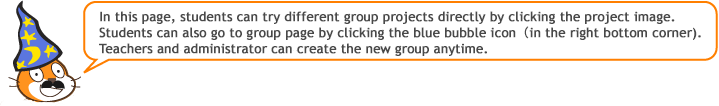
<style>
.page{position:relative;width:719px;height:106px;background:#ffffff}
.page>*{position:absolute;margin:0}
.t1{font:13px/16px "TrebuchetMS";color:#494949;font-weight:bold}
.t2{font:13px/16px "STHeitiTC-Light";color:#494949;font-weight:bold}
</style>
<div class="page">
<p class="t1" style="left:99px;top:11px;width:602px;height:45px">In this page, students can try different group projects directly by clicking the project image.<br>Students can also go to group page by clicking the blue bubble icon<span class="t2">（</span>in the right bottom corner).<br>Teachers and administrator can create the new group anytime.</p>
</div>
